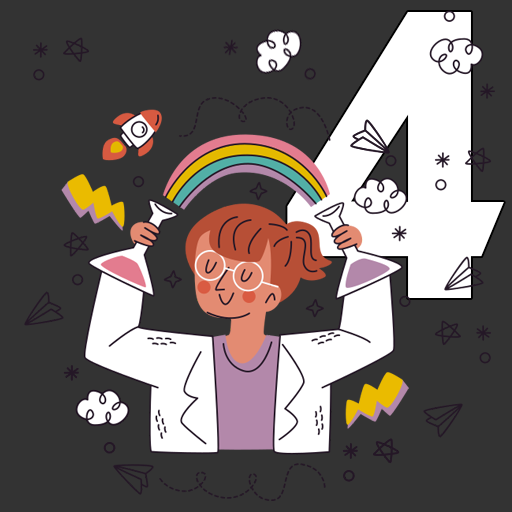
<style>
.page{position:relative;width:512px;height:512px;background:#333333}
.page>*{position:absolute;margin:0}
.t1{font:461px "LiBhasa52Unicode";color:#ffffff}
</style>
<div class="page">
<p class="t1" style="left:287px;top:12px;width:217px;height:286px">4</p>
</div>
